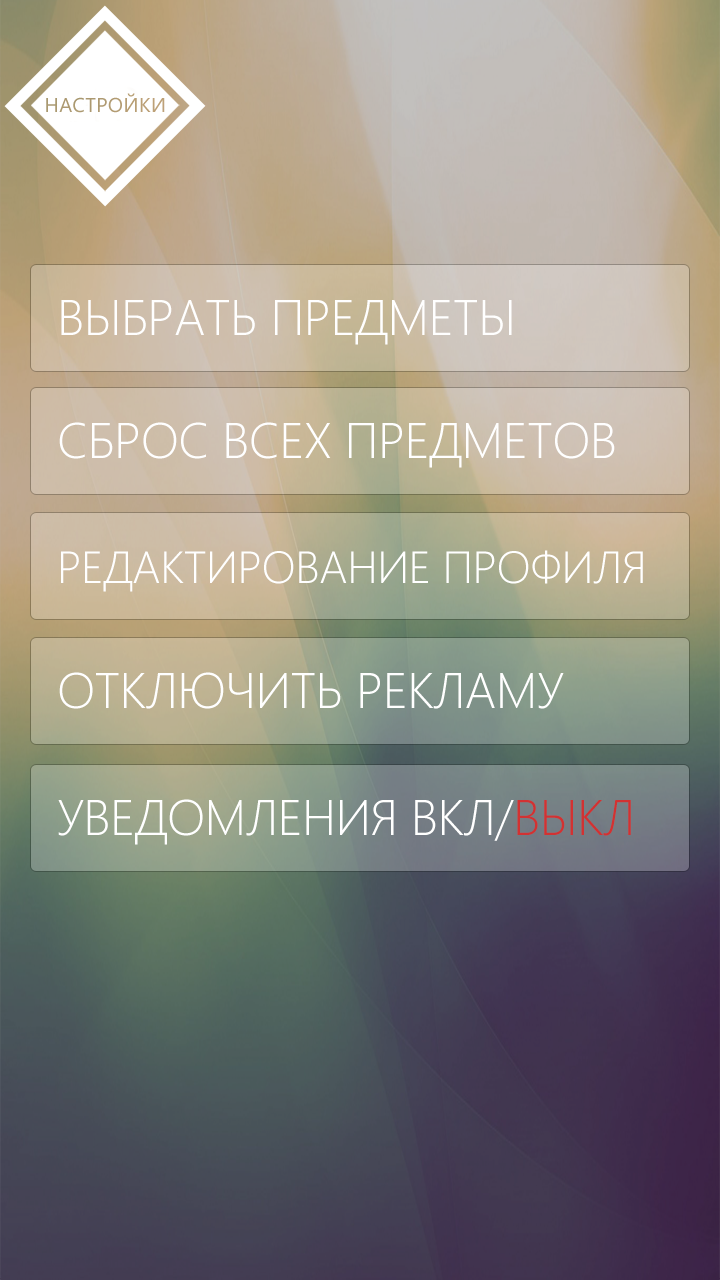
<style>
.page{position:relative;width:720px;height:1280px}
.page>*{position:absolute;margin:0}
.t1{font:50px "SegoeUI-Light";letter-spacing:-0.01em;color:#ffffff}
.t2{font:45px "SegoeUI-Light";letter-spacing:-0.01em;color:#ffffff}
.t3{font:50px "SegoeUI-Light";letter-spacing:-0.01em;color:#d23232}
</style>
<div class="page">
<p class="t1" style="left:61px;top:300px;width:451px;height:45px">ВЫБРАТЬ ПРЕДМЕТЫ</p>
<p class="t1" style="left:59px;top:422px;width:556px;height:46px">СБРОС ВСЕХ ПРЕДМЕТОВ</p>
<p class="t2" style="left:61px;top:550px;width:582px;height:42px">РЕДАКТИРОВАНИЕ ПРОФИЛЯ</p>
<p class="t1" style="left:59px;top:672px;width:505px;height:37px">ОТКЛЮЧИТЬ РЕКЛАМУ</p>
<p class="t1" style="left:58px;top:799px;width:573px;height:46px">УВЕДОМЛЕНИЯ ВКЛ/<span class="t3">ВЫКЛ</span></p>
</div>
